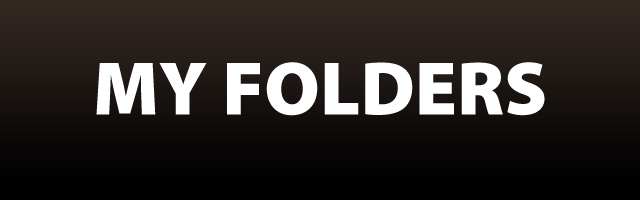
<style>
.page{position:relative;width:640px;height:200px}
.page>*{position:absolute;margin:0}
.t1{font:76.6px "MyriadPro-Black";color:#ffffff}
</style>
<div class="page">
<p class="t1" style="left:96px;top:62px;width:449px;height:54px">MY FOLDERS</p>
</div>
